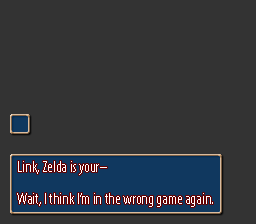
<style>
.page{position:relative;width:256px;height:224px;background:#333333}
.page>*{position:absolute;margin:0}
.t1{font:16px/16px "MyriadPro-Cond";color:#fefefe}
</style>
<div class="page">
<p class="t1" style="left:17px;top:161px;width:196px;height:46px">Link, Zelda is your–<br><br>Wait, I think I’m in the wrong game again.</p>
</div>
